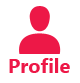
<style>
.page{position:relative;width:80px;height:83px;background:#ffffff}
.page>*{position:absolute;margin:0}
.t1{font:20px "SegoeUI-Bold";color:#ed1847}
</style>
<div class="page">
<p class="t1" style="left:9px;top:58px;width:61px;height:15px">Profile</p>
</div>
